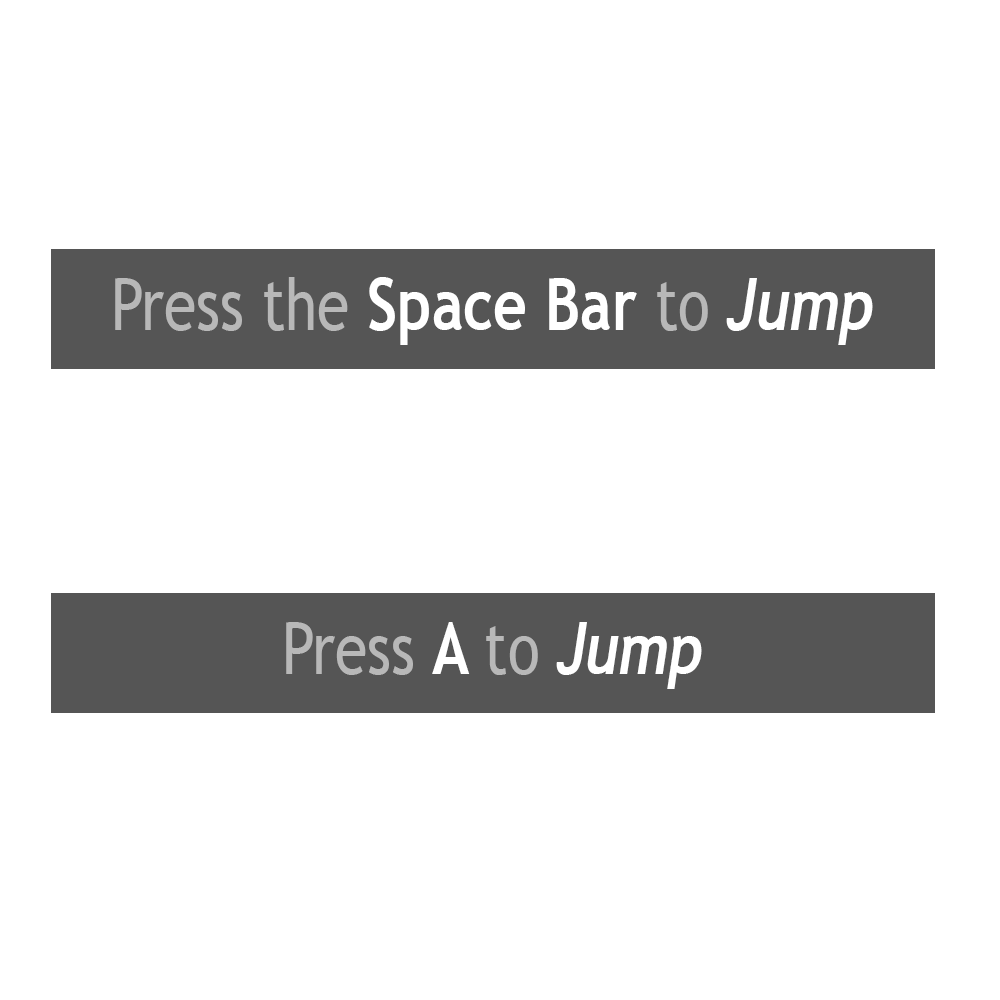
<style>
.page{position:relative;width:1000px;height:1000px;background:#ffffff}
.page>*{position:absolute;margin:0}
.t1{font:72.1px "TrebuchetMS";color:#b8b8b8;scale:0.82 1}
.t2{font:72.1px "TrebuchetMS-Bold";color:#ffffff;scale:0.82 1}
.t3{font:72.1px "Trebuchet-BoldItalic";color:#ffffff;scale:0.82 1}
</style>
<div class="page">
<p class="t1" style="left:115px;top:277px;width:758px;height:68px">Press the <span class="t2">Space Bar </span>to <span class="t3">Jump</span></p>
<p class="t1" style="left:286px;top:622px;width:416px;height:67px">Press <span class="t2">A </span>to <span class="t3">Jump</span></p>
</div>
